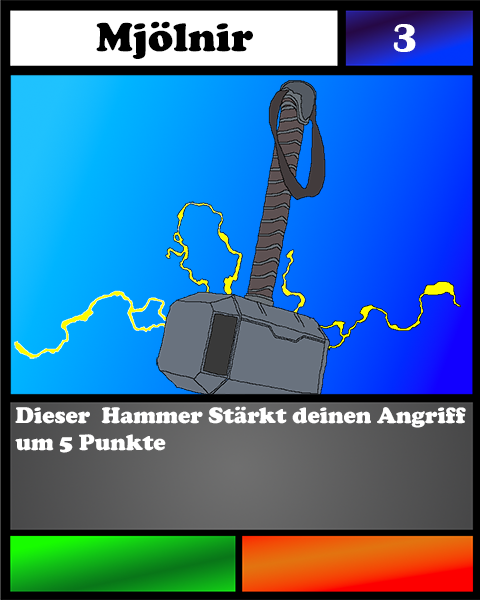
<style>
.page{position:relative;width:480px;height:600px}
.page>*{position:absolute;margin:0}
.t1{font:41.7px "CooperBlack";color:#000000}
.t2{font:41.7px "BritannicBold";color:#ffffff}
.t3{font:23.1px "CooperBlack";color:#ffffff}
</style>
<div class="page">
<p class="t1" style="left:96px;top:21px;width:157px;height:38px">Mjölnir</p>
<p class="t2" style="left:393px;top:24px;width:23px;height:28px">3</p>
<p class="t3" style="left:15px;top:406px;width:451px;height:47px">Dieser  Hammer Stärkt deinen Angriff um 5 Punkte</p>
</div>
